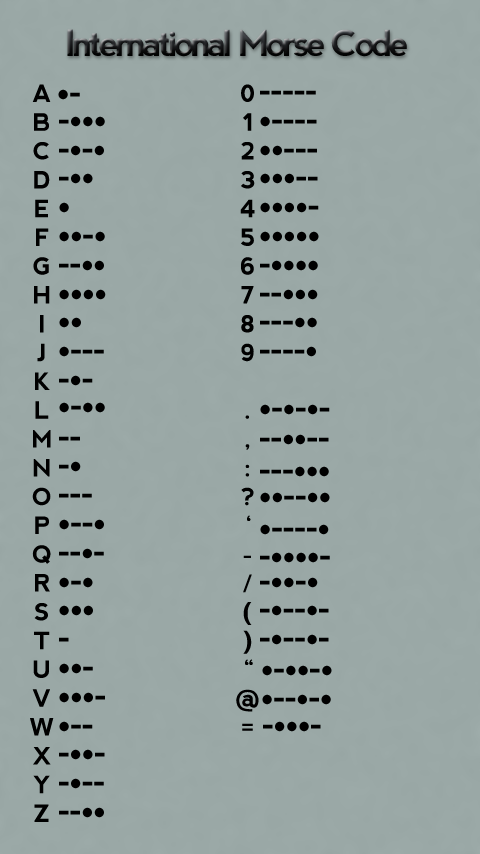
<style>
.page{position:relative;width:480px;height:854px;background:#9aa8a6}
.page>*{position:absolute;margin:0}
.t1{font:36px "nevis-Bold";letter-spacing:-0.1em}
.t2{font:24px "nevis-Bold";letter-spacing:-0.1em;color:#000000}
.t3{font:36px "MyriadPro-Bold";color:#000000}
</style>
<div class="page">
<p class="t1" style="left:67px;top:29px;width:340px;height:28px">International Morse Code</p>
<p class="t2" style="left:30px;top:84px;width:24px;height:738px;text-align:center">A<br>B<br>C<br>D<br>E<br>F<br>G<br>H<br>I<br>J<br>K<br>L<br>M<br>N<br>O<br>P<br>Q<br>R<br>S<br>T<br>U<br>V<br>W<br>X<br>Y<br>Z</p>
<p class="t3" style="left:58px;top:89px;width:22px;height:11px">•-</p>
<p class="t2" style="left:236px;top:84px;width:23px;height:647px;text-align:center">0<br>1<br>2<br>3<br>4<br>5<br>6<br>7<br>8<br>9<br><br>.<br>,<br>:<br>?<br>‘<br>-<br>/<br>(<br>)<br>“<br>@<br>=</p>
<p class="t3" style="left:260px;top:90px;width:56px;height:5px">-----</p>
<p class="t3" style="left:59px;top:116px;width:46px;height:11px">-•••</p>
<p class="t3" style="left:260px;top:116px;width:57px;height:11px">•----</p>
<p class="t3" style="left:59px;top:145px;width:45px;height:11px">-•-•</p>
<p class="t3" style="left:260px;top:145px;width:57px;height:11px">••---</p>
<p class="t3" style="left:59px;top:173px;width:34px;height:11px">-••</p>
<p class="t3" style="left:260px;top:173px;width:58px;height:11px">•••--</p>
<p class="t3" style="left:59px;top:202px;width:10px;height:11px">•</p>
<p class="t3" style="left:260px;top:202px;width:59px;height:11px">••••-</p>
<p class="t3" style="left:59px;top:231px;width:46px;height:11px">••-•</p>
<p class="t3" style="left:260px;top:231px;width:59px;height:11px">•••••</p>
<p class="t3" style="left:59px;top:260px;width:45px;height:11px">--••</p>
<p class="t3" style="left:260px;top:260px;width:58px;height:11px">-••••</p>
<p class="t3" style="left:59px;top:289px;width:47px;height:11px">••••</p>
<p class="t3" style="left:260px;top:289px;width:58px;height:11px">--•••</p>
<p class="t3" style="left:59px;top:317px;width:22px;height:11px">••</p>
<p class="t3" style="left:260px;top:317px;width:57px;height:11px">---••</p>
<p class="t3" style="left:59px;top:346px;width:45px;height:11px">•---</p>
<p class="t3" style="left:260px;top:346px;width:56px;height:11px">----•</p>
<p class="t3" style="left:59px;top:375px;width:34px;height:11px">-•-</p>
<p class="t3" style="left:59px;top:402px;width:46px;height:11px">•-••</p>
<p class="t3" style="left:260px;top:404px;width:70px;height:11px">•-•-•-</p>
<p class="t3" style="left:59px;top:436px;width:21px;height:5px">--</p>
<p class="t3" style="left:260px;top:434px;width:69px;height:11px">--••--</p>
<p class="t3" style="left:59px;top:461px;width:22px;height:11px">-•</p>
<p class="t3" style="left:260px;top:466px;width:69px;height:11px">---•••</p>
<p class="t3" style="left:59px;top:493px;width:33px;height:5px">---</p>
<p class="t3" style="left:260px;top:492px;width:70px;height:11px">••--••</p>
<p class="t3" style="left:59px;top:519px;width:45px;height:11px">•--•</p>
<p class="t3" style="left:260px;top:524px;width:69px;height:11px">•----•</p>
<p class="t3" style="left:59px;top:548px;width:45px;height:11px">--•-</p>
<p class="t3" style="left:260px;top:552px;width:70px;height:11px">-••••-</p>
<p class="t3" style="left:59px;top:577px;width:34px;height:11px">•-•</p>
<p class="t3" style="left:260px;top:577px;width:58px;height:11px">-••-•</p>
<p class="t3" style="left:59px;top:605px;width:34px;height:11px">•••</p>
<p class="t3" style="left:260px;top:605px;width:69px;height:11px">-•--•-</p>
<p class="t3" style="left:59px;top:637px;width:10px;height:5px">-</p>
<p class="t3" style="left:260px;top:634px;width:69px;height:11px">-•--•-</p>
<p class="t3" style="left:59px;top:663px;width:34px;height:11px">••-</p>
<p class="t3" style="left:262px;top:665px;width:70px;height:11px">•-••-•</p>
<p class="t3" style="left:59px;top:692px;width:46px;height:11px">•••-</p>
<p class="t3" style="left:262px;top:694px;width:69px;height:11px">•--•-•</p>
<p class="t3" style="left:59px;top:721px;width:34px;height:11px">•--</p>
<p class="t3" style="left:263px;top:721px;width:58px;height:11px">-•••-</p>
<p class="t3" style="left:59px;top:749px;width:46px;height:11px">-••-</p>
<p class="t3" style="left:59px;top:778px;width:45px;height:11px">-•--</p>
<p class="t3" style="left:59px;top:807px;width:45px;height:11px">--••</p>
</div>
